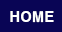
<style>
.page{position:relative;width:62px;height:32px;background:#090555}
.page>*{position:absolute;margin:0}
.t1{font:14px "H2gtrE";color:#ffffff}
</style>
<div class="page">
<p class="t1" style="left:10px;top:11px;width:44px;height:12px">HOME</p>
</div>
